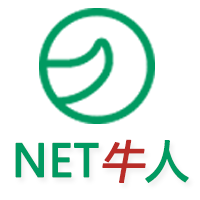
<style>
.page{position:relative;width:200px;height:200px;background:#ffffff}
.page>*{position:absolute;margin:0}
.t1{font:44px "MicrosoftYaHei";color:#009a61;font-weight:bold}
.t2{font:44px "MicrosoftYaHei";color:#b92c28;font-weight:bold;font-style:italic}
</style>
<div class="page">
<p class="t1" style="left:15px;top:139px;width:174px;height:44px">NET<span class="t2">牛</span>人</p>
</div>
